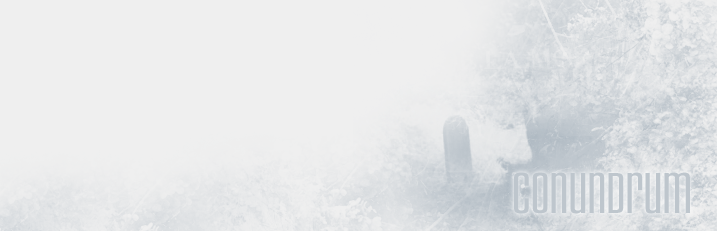
<style>
.page{position:relative;width:717px;height:231px;background:#efefef}
.page>*{position:absolute;margin:0}
.t1{font:60px "HouseGothic-LightAltCaps";color:#bec6cd}
</style>
<div class="page">
<p class="t1" style="left:514px;top:172px;width:176px;height:42px">conundrum</p>
</div>
